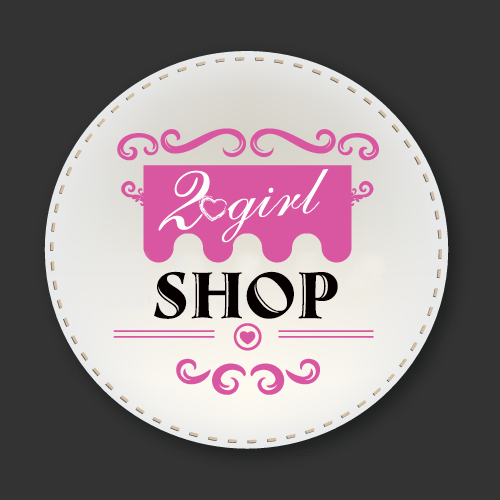
<style>
.page{position:relative;width:500px;height:500px;background:#333333}
.page>*{position:absolute;margin:0}
.t1{font:123px "UTM-Beautiful-Caps";color:#ffffff}
.t2{font:70.7px "UTM-Beautiful-Caps";color:#ffffff;scale:1.07 1}
.t3{font:68px "UTM-Ambrose";color:#060000}
</style>
<div class="page">
<p class="t1" style="left:158px;top:170px;width:52px;height:61px">2</p>
<p class="t2" style="left:221px;top:169px;width:108px;height:74px;rotate:-5deg">girl</p>
<p class="t3" style="left:154px;top:271px;width:184px;height:48px">shop</p>
</div>
